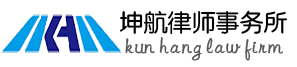
<style>
.page{position:relative;width:297px;height:67px;background:#ffffff}
.page>*{position:absolute;margin:0}
.t1{font:24px "FZY3JW--GB1-0";color:#000000}
.t2{font:24px "JQiTi";color:#5a5a5a}
</style>
<div class="page">
<p class="t1" style="left:120px;top:10px;width:167px;height:24px">坤航律师事务所</p>
<p class="t2" style="left:125px;top:37px;width:159px;height:24px">kun hang law firm</p>
</div>
